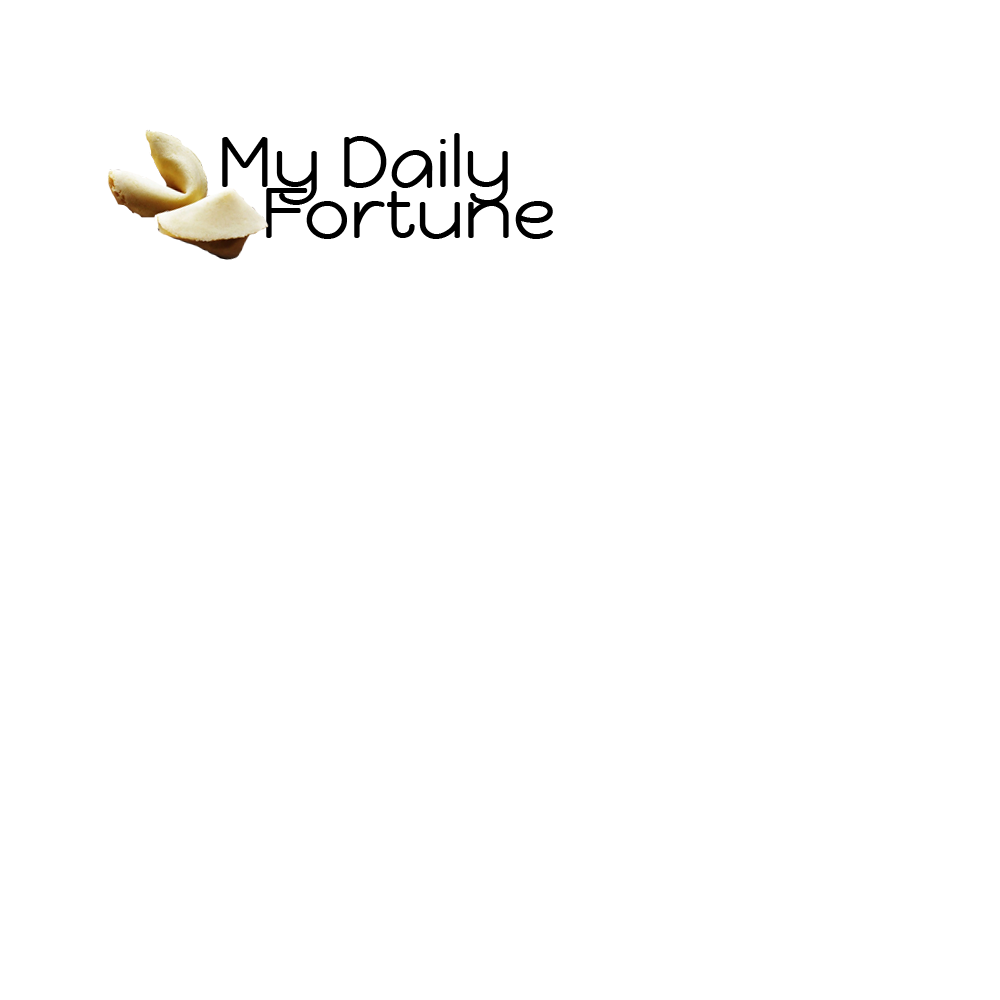
<style>
.page{position:relative;width:1000px;height:1000px;background:#ffffff}
.page>*{position:absolute;margin:0}
.t1{font:72px "HappyMonkey-Regular";color:#000000}
</style>
<div class="page">
<p class="t1" style="left:222px;top:133px;width:286px;height:72px">My Daily</p>
<p class="t1" style="left:266px;top:188px;width:287px;height:51px">Fortune</p>
</div>
